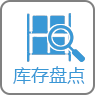
<style>
.page{position:relative;width:95px;height:95px;background:#ffffff}
.page>*{position:absolute;margin:0}
.t1{font:18px "MicrosoftYaHei";color:#3998d6}
</style>
<div class="page">
<p class="t1" style="left:13px;top:66px;width:72px;height:18px">库存盘点</p>
</div>
